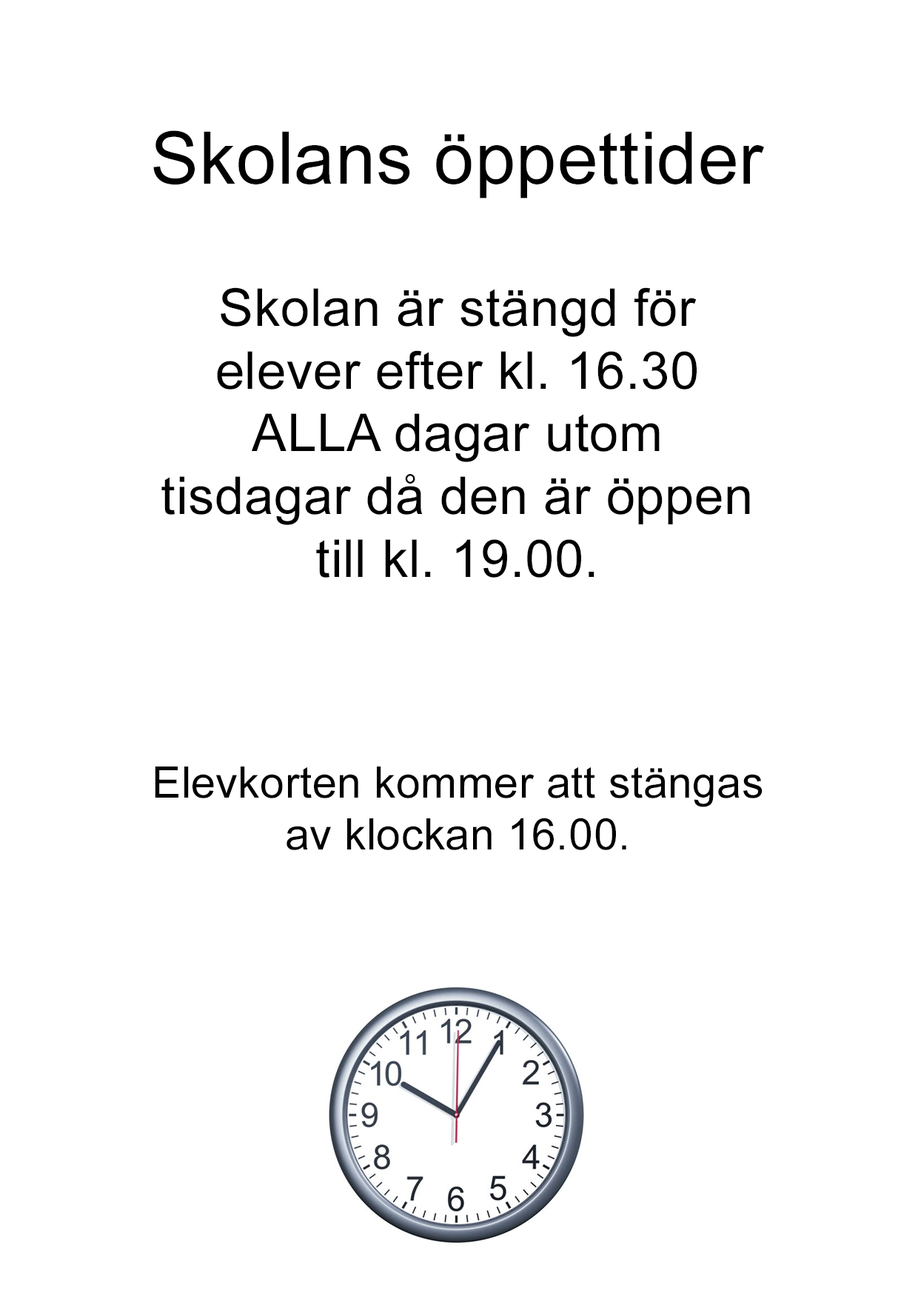
<style>
.page{position:relative;width:918px;height:1299px;background:#ffffff}
.page>*{position:absolute;margin:0}
.t1{font:72.5px "ArialMT";letter-spacing:0.01em;color:#000000}
.t2{font:52.2px "ArialMT";letter-spacing:0.01em;color:#000000}
.t3{font:43.5px "ArialMT";letter-spacing:0.01em;color:#000000}
</style>
<div class="page">
<p class="t1" style="left:153px;top:130px;width:611px;height:68px">Skolans öppettider</p>
<p class="t2" style="left:161px;top:287px;width:589px;height:291px;text-align:center">Skolan är stängd för elever efter kl. 16.30 ALLA dagar utom tisdagar då den är öppen till kl. 19.00.</p>
<p class="t3" style="left:155px;top:766px;width:608px;height:84px;text-align:center">Elevkorten kommer att stängas<br>av klockan 16.00.</p>
</div>
